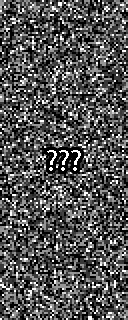
<style>
.page{position:relative;width:128px;height:320px;background:#383838}
.page>*{position:absolute;margin:0}
.t1{font:30px "MyriadPro-Regular";color:#ffffff}
</style>
<div class="page">
<p class="t1" style="left:47px;top:150px;width:34px;height:21px">???</p>
</div>
